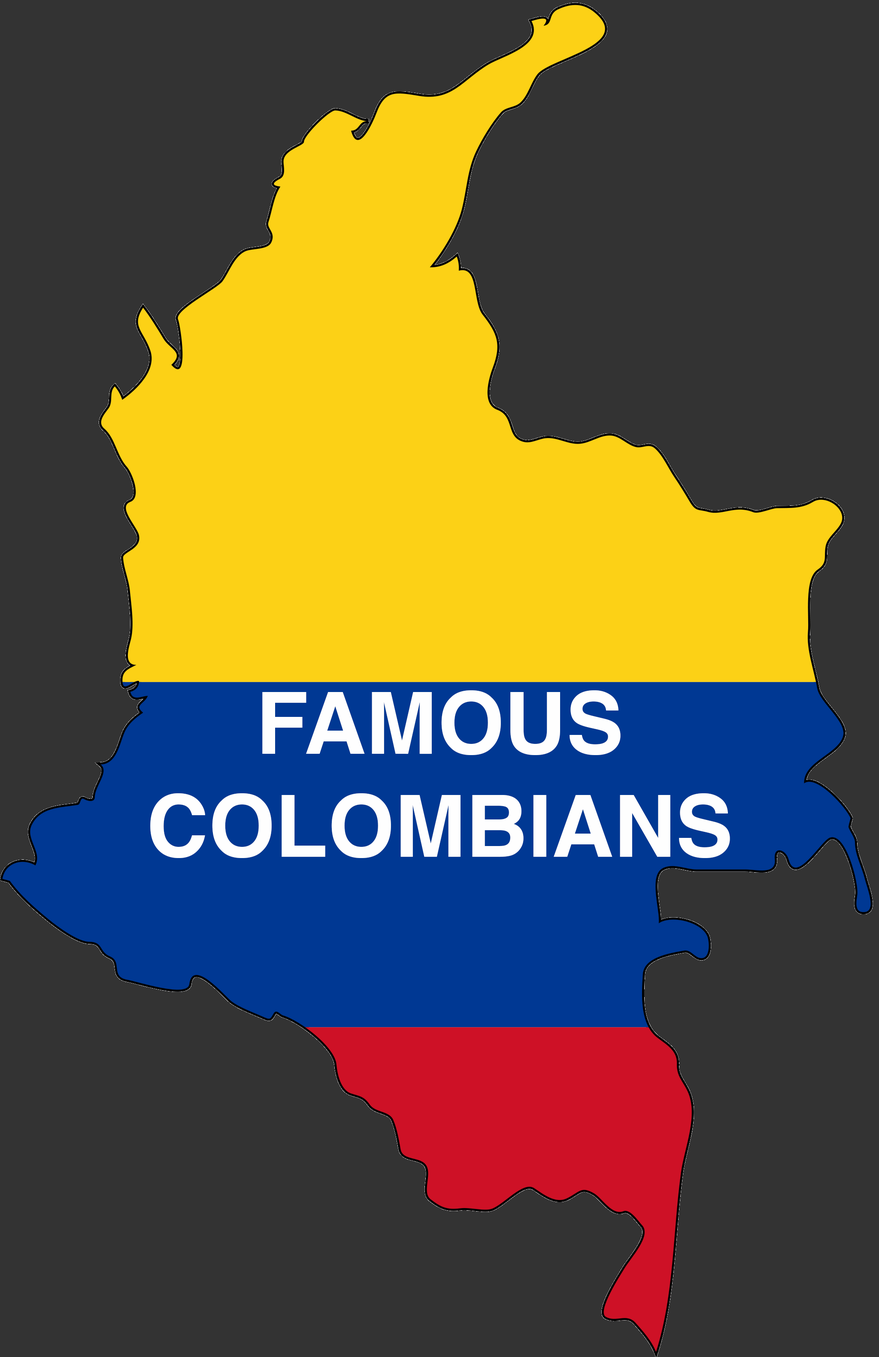
<style>
.page{position:relative;width:879px;height:1357px;background:#333333}
.page>*{position:absolute;margin:0}
.t1{font:85.8px "Helvetica-Bold";color:#fefefe}
</style>
<div class="page">
<p class="t1" style="left:150px;top:690px;width:580px;height:168px;text-align:center">FAMOUS<br>COLOMBIANS</p>
</div>
